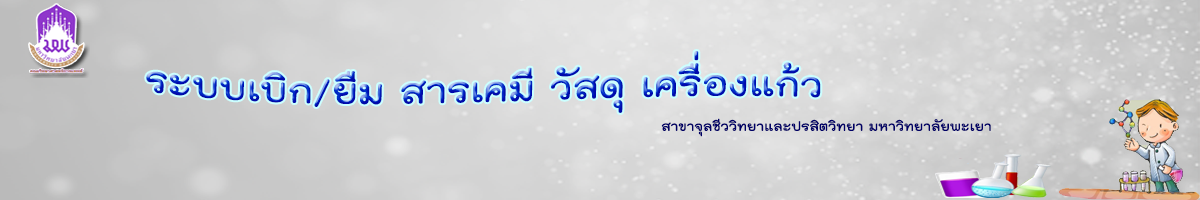
<style>
.page{position:relative;width:1200px;height:200px}
.page>*{position:absolute;margin:0}
.t1{font:50px "THKodchasal-Bold"}
.t2{font:18px "THKodchasal-Bold";color:#000066}
</style>
<div class="page">
<p class="t1" style="left:146px;top:51px;width:675px;height:62px;rotate:1deg">ระบบเบิก/ยืม สารเคมี วัสดุ เครื่องแก้ว</p>
<p class="t2" style="left:661px;top:118px;width:330px;height:19px">สาขาจุลชีววิทยาและปรสิตวิทยา มหาวิทยาลัยพะเยา</p>
</div>
